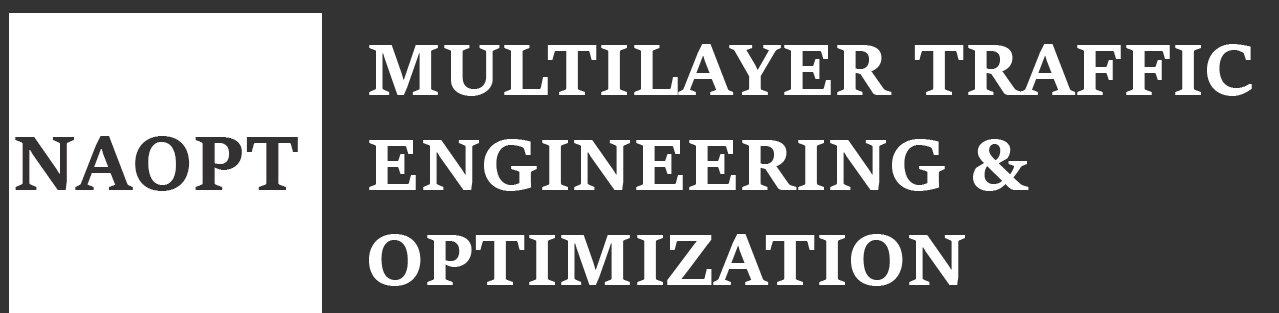
<style>
.page{position:relative;width:1279px;height:313px;background:#333333}
.page>*{position:absolute;margin:0}
.t1{font:79.2px "SitkaText-Bold";color:#ffffff}
.t2{font:83.3px "SitkaText-Bold";color:#333132}
</style>
<div class="page">
<p class="t1" style="left:369px;top:44px;width:883px;height:242px">MULTILAYER TRAFFIC <br>ENGINEERING &amp; <br>OPTIMIZATION</p>
<p class="t2" style="left:15px;top:136px;width:283px;height:55px">NAOPT</p>
</div>
